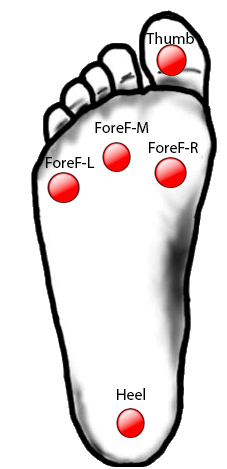
<style>
.page{position:relative;width:227px;height:469px;background:#ffffff}
.page>*{position:absolute;margin:0}
.t1{font:12px "MyriadPro-Regular";color:#000000}
</style>
<div class="page">
<p class="t1" style="left:146px;top:32px;width:48px;height:12px">Thumb</p>
<p class="t1" style="left:95px;top:122px;width:54px;height:11px">ForeF-M</p>
<p class="t1" style="left:149px;top:142px;width:49px;height:11px">ForeF-R</p>
<p class="t1" style="left:46px;top:157px;width:49px;height:11px">ForeF-L</p>
<p class="t1" style="left:117px;top:388px;width:28px;height:12px">Heel</p>
</div>
